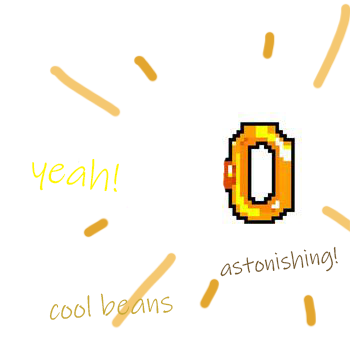
<style>
.page{position:relative;width:350px;height:350px;background:#ffffff}
.page>*{position:absolute;margin:0}
.t1{font:41px "InkFree";color:#fff600}
.t2{font:23.8px "InkFree";color:#745724}
.t3{font:30.3px "InkFree";color:#c8aa33}
</style>
<div class="page">
<p class="t1" style="left:32px;top:158px;width:87px;height:34px;rotate:7deg">yeah!</p>
<p class="t2" style="left:220px;top:246px;width:118px;height:31px;rotate:-7deg">astonishing!</p>
<p class="t3" style="left:49px;top:293px;width:124px;height:27px;rotate:-4deg">cool beans</p>
</div>
